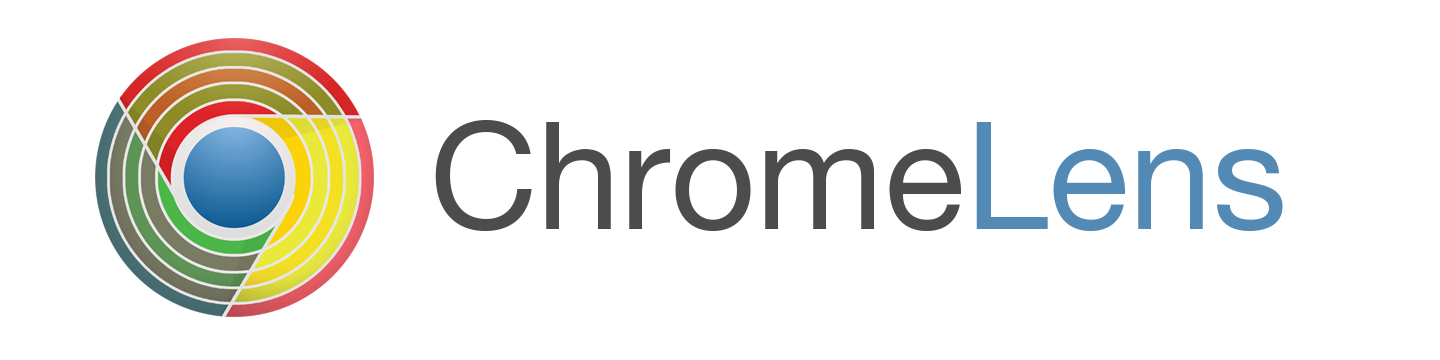
<style>
.page{position:relative;width:1440px;height:360px;background:#ffffff}
.page>*{position:absolute;margin:0}
.t1{font:150px "HelveticaNeueLTPro-Roman"}
</style>
<div class="page">
<p class="t1" style="left:435px;top:120px;width:848px;height:111px">ChromeLens</p>
</div>
